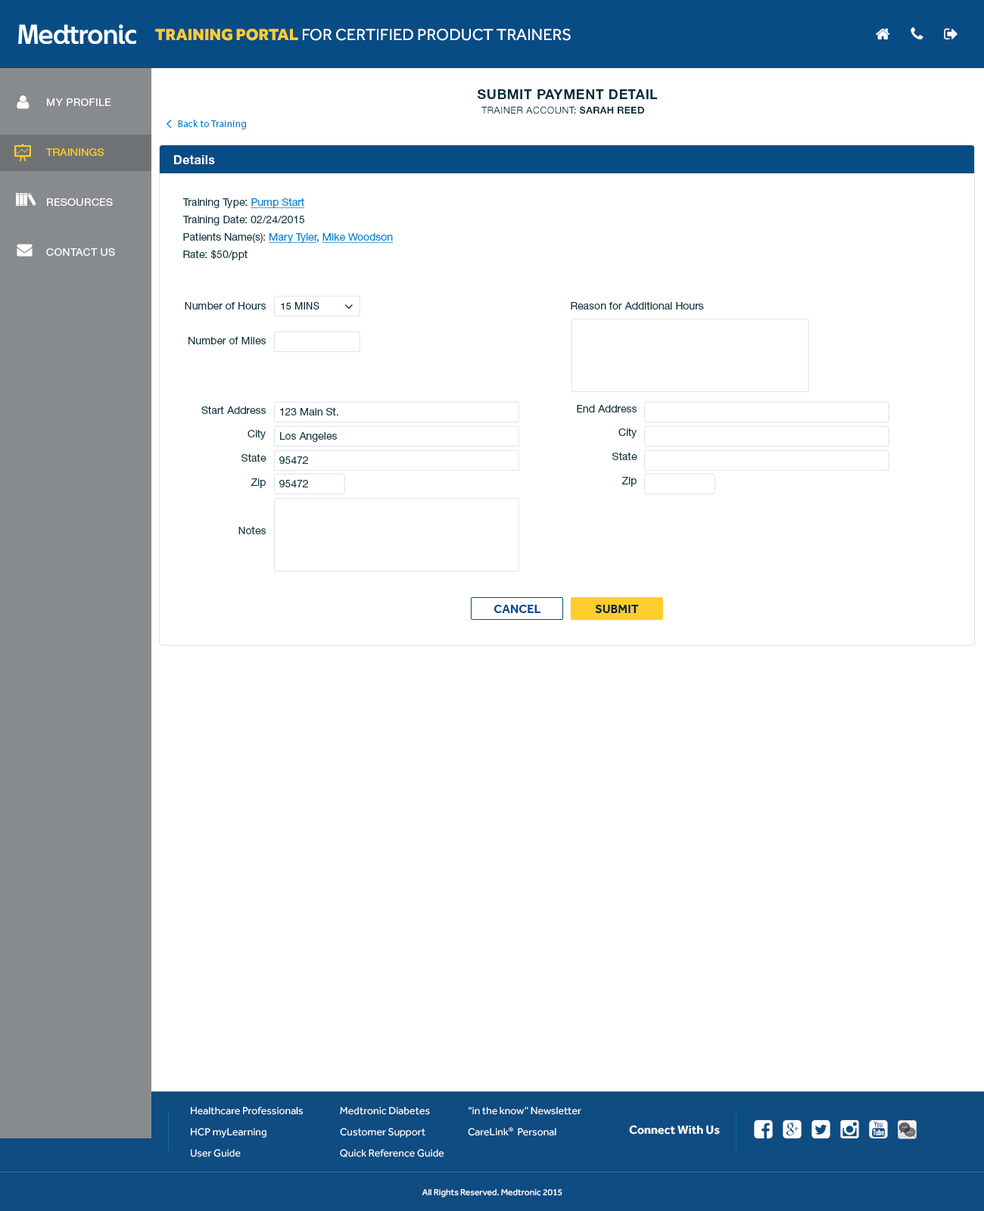
<style>
.page{position:relative;width:984px;height:1211px;background:#ffffff}
.page>*{position:absolute;margin:0}
.t1{font:16.7px "Effra-Regular";color:#ffffff;text-transform:uppercase}
.t2{font:16.7px "Effra-Heavy";color:#fecd2e;text-transform:uppercase}
.t3{font:13.6px "HelveticaNeueLTStd-Bd";letter-spacing:0.025em;color:#032e3a;text-transform:uppercase}
.t4{font:10.6px/50px "HelveticaNeueLTStd-Roman";letter-spacing:0.025em;color:#ffffff;text-transform:uppercase}
.t5{font:10.6px/50px "HelveticaNeueLTStd-Roman";letter-spacing:0.025em;color:#fecd2e;text-transform:uppercase}
.t6{font:9.6px "HelveticaNeueLTStd-Roman";letter-spacing:0.025em;color:#032e3a}
.t7{font:9.6px "HelveticaNeueLTStd-Bd";letter-spacing:0.025em;color:#032e3a}
.t8{font:9.8px "MyriadPro-Regular";letter-spacing:0.025em;color:#0082cd}
.t9{font:12.1px "HelveticaNeueLTStd-Bd";letter-spacing:0.025em;color:#ffffff}
.t10{font:10.6px/17.4px "HelveticaNeueLTStd-Roman";color:#133944}
.t11{font:10.6px/17.4px "HelveticaNeueLTStd-Roman";color:#0082cd;text-decoration:underline}
.t12{font:10.6px/6.1px "HelveticaNeueLTStd-Roman";color:#133944}
.t13{font:10.6px/12.1px "HelveticaNeueLTStd-Roman";color:#133944}
.t14{font:9.6px "HelveticaNeueLTStd-Roman";letter-spacing:0.025em;color:#032e3a;text-transform:uppercase}
.t15{font:10.6px "HelveticaNeueLTStd-Roman";color:#133944}
.t16{font:10.6px/17.4px "HelveticaNeueLTStd-Roman";color:#ffffff}
.t17{font:12.1px "Effra-Bold";color:#084c85;text-transform:uppercase}
.t18{font:12.1px "Effra-Bold";color:#011f45;text-transform:uppercase}
.t19{font:10.6px/21.2px "Effra-Regular";color:#ffffff}
.t20{font:12.1px "Effra-Bold";color:#ffffff}
.t21{font:8.9px "Effra-Regular";color:#ffffff}
</style>
<div class="page">
<p class="t1" style="left:155px;top:29px;width:416px;height:12px"><span class="t2">Training Portal</span> for certified product trainers</p>
<p class="t3" style="left:478px;top:89px;width:180px;height:10px">submit payment detail</p>
<p class="t4" style="left:46px;top:98px;width:69px;height:158px">My Profile<br><span class="t5">Trainings<br></span>resources<br>contact us</p>
<p class="t6" style="left:482px;top:106px;width:162px;height:8px">TRAINER ACCOUNT: <span class="t7">SARAH REED</span></p>
<p class="t8" style="left:178px;top:120px;width:68px;height:9px">Back to Training</p>
<p class="t9" style="left:174px;top:155px;width:41px;height:9px">Details</p>
<p class="t10" style="left:182px;top:198px;width:212px;height:62px">Training Type: <span class="t11">Pump Start<br></span>Training Date: 02/24/2015<br>Patients Name(s): <span class="t11">Mary Tyler</span>, <span class="t11">Mike Woodson<br></span>Rate: $50/ppt</p>
<p class="t10" style="left:185px;top:302px;width:82px;height:233px;text-align:right">Number of Hours<br><br>Number of Miles<br><br><br><br>Start Address<br><br><span class="t12">City<br></span><span class="t13"><br>State<br><br>Zip<br><br><br><br>Notes</span></p>
<p class="t14" style="left:281px;top:302px;width:39px;height:8px">15 Mins</p>
<p class="t15" style="left:571px;top:301px;width:133px;height:9px">Reason for Additional Hours</p>
<p class="t16" style="left:561px;top:388px;width:77px;height:99px;text-align:right">Number of Hour<span class="t10"><br>End Address<br><br></span><span class="t12">City<br></span><span class="t13"><br>State<br><br>Zip</span></p>
<p class="t15" style="left:280px;top:407px;width:58px;height:9px">123 Main St.</p>
<p class="t15" style="left:280px;top:432px;width:57px;height:10px">Los Angeles</p>
<p class="t15" style="left:279px;top:457px;width:29px;height:7px">95472</p>
<p class="t15" style="left:279px;top:480px;width:29px;height:8px">95472</p>
<p class="t17" style="left:494px;top:605px;width:47px;height:8px">Cancel</p>
<p class="t18" style="left:595px;top:605px;width:44px;height:8px">submit</p>
<p class="t19" style="left:191px;top:1107px;width:112px;height:51px">Healthcare Professionals<br>HCP myLearning<br>User Guide</p>
<p class="t19" style="left:340px;top:1107px;width:104px;height:51px;text-align:right">Medtronic Diabetes<br>Customer Support<br>Quick Reference Guide</p>
<p class="t19" style="left:468px;top:1107px;width:113px;height:29px">“in the know” Newsletter<br>CareLink®  Personal</p>
<p class="t20" style="left:629px;top:1126px;width:91px;height:9px">Connect With Us</p>
<p class="t21" style="left:422px;top:1189px;width:141px;height:9px">2015 All Rights Reserved. Medtronic</p>
</div>
